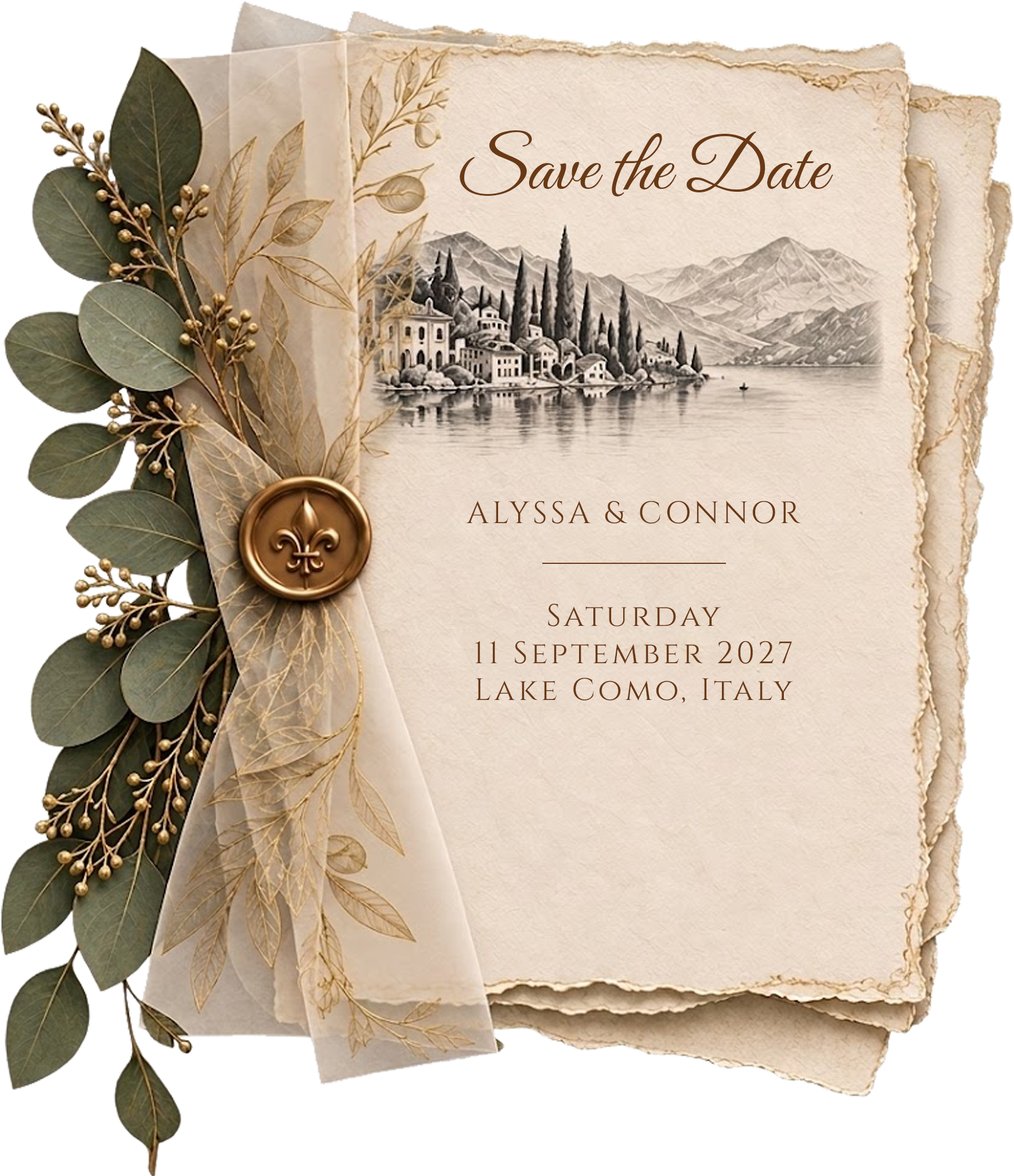
<style>
.page{position:relative;width:1014px;height:1176px;background:#ffffff}
.page>*{position:absolute;margin:0}
.t1{font:72.2px "GreatVibes-Regular";color:#693915;scale:1.06 1}
.t2{font:31px "Cinzel-Regular";letter-spacing:0.1em;color:#693915}
</style>
<div class="page">
<p class="t1" style="left:460px;top:130px;width:373px;height:66px">Save the Date</p>
<p class="t2" style="left:466px;top:501px;width:335px;height:23px">ALYSSA &amp; CONNOR</p>
<p class="t2" style="left:475px;top:603px;width:318px;height:100px;text-align:center">Saturday<br>11 September 2027<br>Lake Como, Italy</p>
</div>
